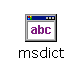
<style>
.page{position:relative;width:80px;height:80px;background:#ffffff}
.page>*{position:absolute;margin:0}
.t1{font:14px "MSReferenceSansSerif";color:#000000}
</style>
<div class="page">
<p class="t1" style="left:19px;top:47px;width:45px;height:11px">msdict</p>
</div>
